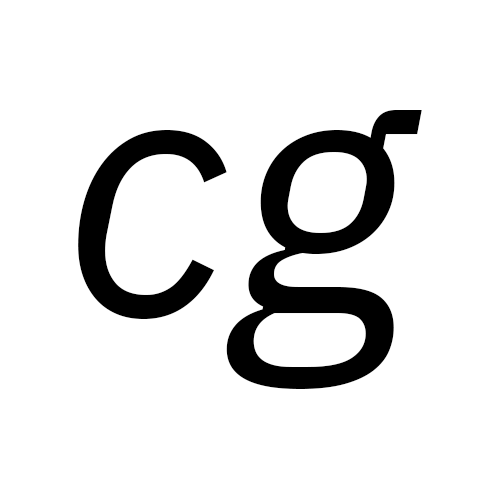
<style>
.page{position:relative;width:500px;height:500px;background:#ffffff}
.page>*{position:absolute;margin:0}
.t1{font:350px "IBMPlexSans-Italic";color:#000000}
</style>
<div class="page">
<p class="t1" style="left:78px;top:110px;width:344px;height:279px">cg</p>
</div>
